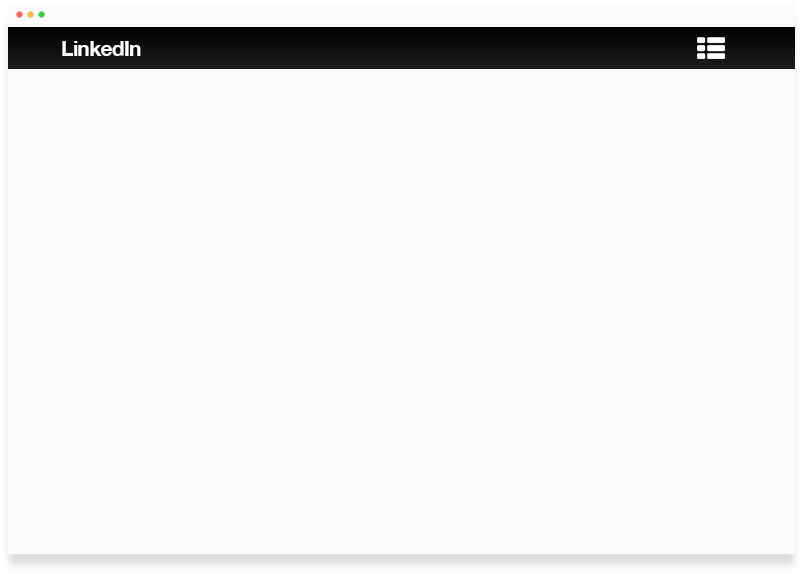
<style>
.page{position:relative;width:803px;height:574px;background:#fafafa}
.page>*{position:absolute;margin:0}
.t1{font:21.3px "HelveticaNeue-Bold";letter-spacing:-0.04em;color:#ffffff}
</style>
<div class="page">
<p class="t1" style="left:62px;top:41px;width:79px;height:15px">LinkedIn</p>
</div>
